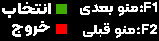
<style>
.page{position:relative;width:159px;height:41px;background:#000000}
.page>*{position:absolute;margin:0}
.t1{font:16px "Kalameh-ExtraBold";letter-spacing:0.01em;color:#ffffff;scale:1.13 1}
.t2{font:13.7px "Kalameh-ExtraBold";letter-spacing:0.01em;color:#ffffff;scale:1.12 1}
.t3{font:15.2px "Kalameh-ExtraBold";letter-spacing:0.01em;color:#ffffff;scale:1.12 1}
.t4{font:13.7px "Kalameh-Bold";letter-spacing:0.01em;color:#ffffff;scale:1.12 1}
</style>
<div class="page">
<p class="t1" style="left:2px;top:2px;width:49px;height:16px">انتخاب</p>
<p class="t2" style="left:80px;top:2px;width:77px;height:14px">F1:منو بعدی</p>
<p class="t3" style="left:12px;top:21px;width:38px;height:16px">خروج</p>
<p class="t4" style="left:83px;top:23px;width:74px;height:15px">F2:منو قبلی</p>
</div>
